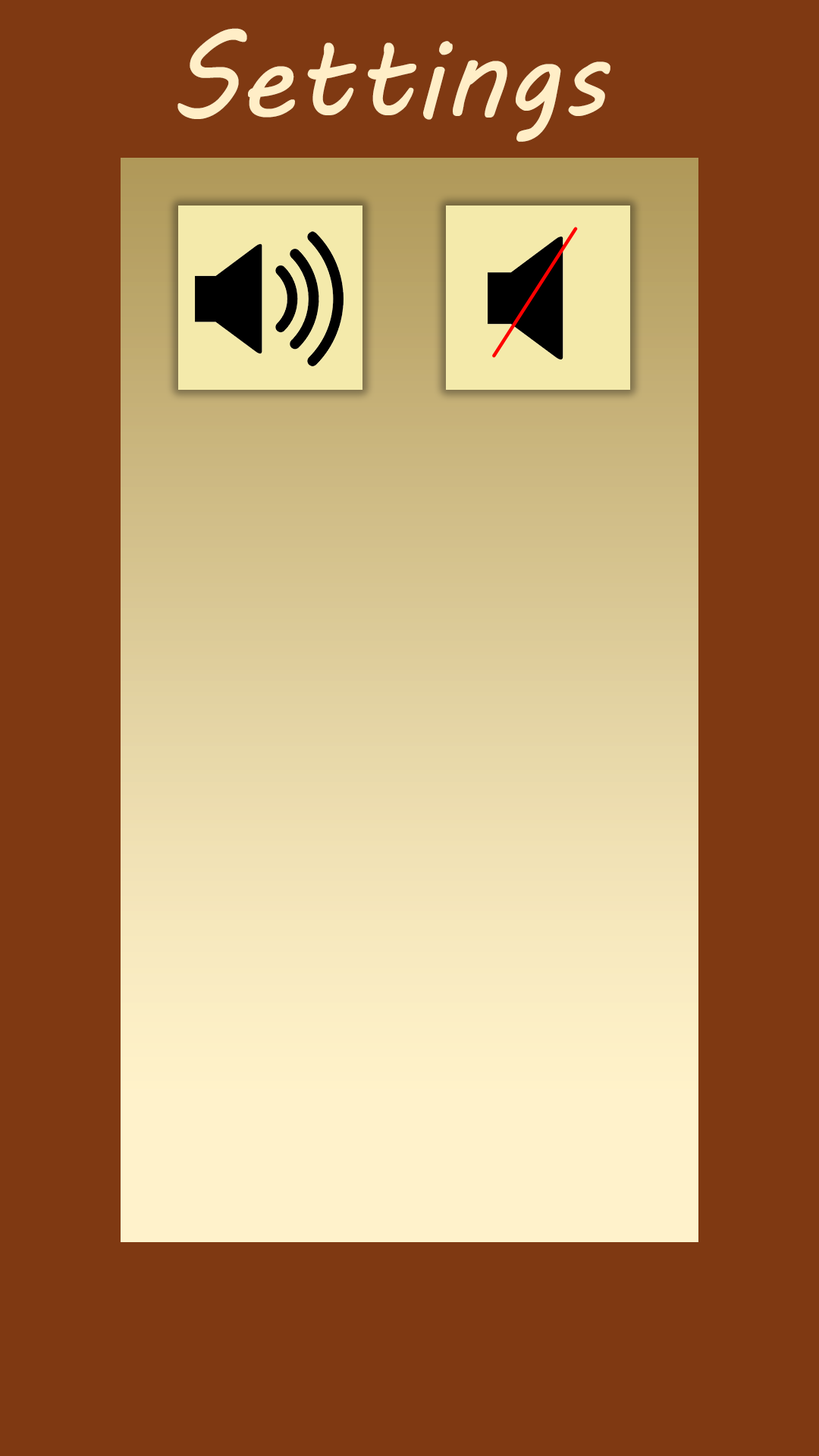
<style>
.page{position:relative;width:819px;height:1456px;background:#7f3912}
.page>*{position:absolute;margin:0}
.t1{font:113.7px "MVBoli";color:#ffeec7}
</style>
<div class="page">
<p class="t1" style="left:177px;top:28px;width:433px;height:114px">Settings</p>
</div>
